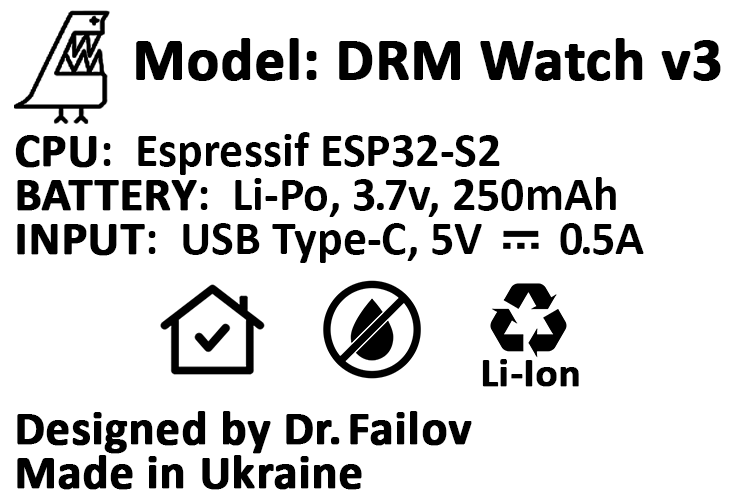
<style>
.page{position:relative;width:741px;height:498px;background:#ffffff}
.page>*{position:absolute;margin:0}
.t1{font:48px/44px "Calibri-Bold";color:#000000;font-weight:bold}
.t2{font:36px "Calibri-Bold";color:#000000;font-weight:bold}
.t3{font:60px "Calibri-Bold";color:#000000;font-weight:bold}
.t4{font:48px/44px "Calibri-Bold";color:#000000}
.t5{font:48px/44px "Calibri-Bold";letter-spacing:-0.05em;color:#000000}
.t6{font:48px/44px "Calibri-Bold";letter-spacing:0.1em;color:#000000;font-weight:bold}
.t7{font:41px "Calibri-Bold";color:#000000;font-weight:bold}
</style>
<div class="page">
<p class="t1" style="left:15px;top:38px;width:706px;height:452px"><span class="t2">             </span><span class="t3">Model: DRM Watch v3<br><br></span>CPU<span class="t4">:  Espressif ESP32-S2</span><br>BATTERY<span class="t4">:  Li-Po, </span><span class="t5">3.</span><span class="t4">7v, 250mAh<br></span>INPUT<span class="t4">:  USB Type-C, 5V       </span><span class="t5">0.</span><span class="t4">5A<br><br><br><br></span>Designed by Dr<span class="t6">.</span>Failov<br>Made in Ukraine</p>
<p class="t7" style="left:482px;top:359px;width:97px;height:28px">Li-Ion</p>
</div>
